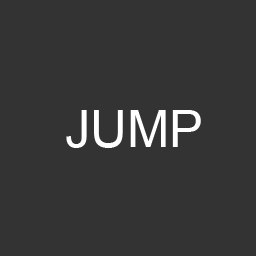
<style>
.page{position:relative;width:256px;height:256px;background:#333333}
.page>*{position:absolute;margin:0}
.t1{font:50.7px "ArialMT";color:#ffffff}
</style>
<div class="page">
<p class="t1" style="left:66px;top:110px;width:135px;height:38px">JUMP</p>
</div>
